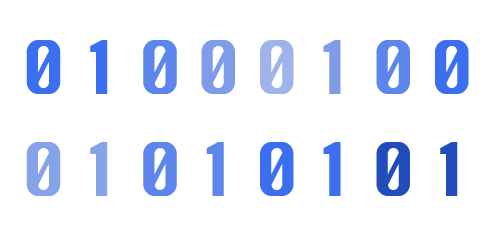
<style>
.page{position:relative;width:500px;height:236px;background:#ffffff}
.page>*{position:absolute;margin:0}
.t1{font:72px/102px "Krungthep";letter-spacing:0.2em;color:#3c6ff0;scale:0.93 1}
.t2{font:72px/102px "Krungthep";letter-spacing:0.2em;color:#5d86ec;scale:0.93 1}
.t3{font:72px/102px "Krungthep";letter-spacing:0.2em;color:#7e9ce9;scale:0.93 1}
.t4{font:72px/102px "Krungthep";letter-spacing:0.2em;color:#9db3ea;scale:0.93 1}
.t5{font:72px/102px "Krungthep";letter-spacing:0.2em;color:#86a2e9;scale:0.93 1}
.t6{font:72px/102px "Krungthep";letter-spacing:0.2em;color:#204cbc;scale:0.93 1}
</style>
<div class="page">
<p class="t1" style="left:26px;top:40px;width:443px;height:156px;text-align:right">01<span class="t2">0</span><span class="t3">0</span><span class="t4">0</span><span class="t3">1</span><span class="t2">0</span>0 <br><span class="t5">01</span><span class="t2">01</span>01<span class="t6">01</span></p>
</div>
